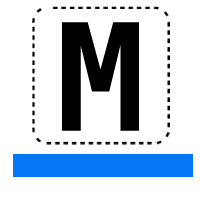
<style>
.page{position:relative;width:200px;height:200px;background:#ffffff}
.page>*{position:absolute;margin:0}
.t1{font:148.4px "BitstreamVeraSansMono-Bold";color:#000000}
</style>
<div class="page">
<p class="t1" style="left:62px;top:22px;width:77px;height:109px">M</p>
</div>
